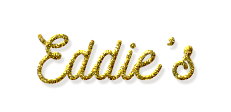
<style>
.page{position:relative;width:231px;height:112px;background:#ffffff}
.page>*{position:absolute;margin:0}
.t1{font:60px "Nickainley";font-weight:bold}
</style>
<div class="page">
<p class="t1" style="left:37px;top:33px;width:158px;height:51px">Eddie's</p>
</div>
